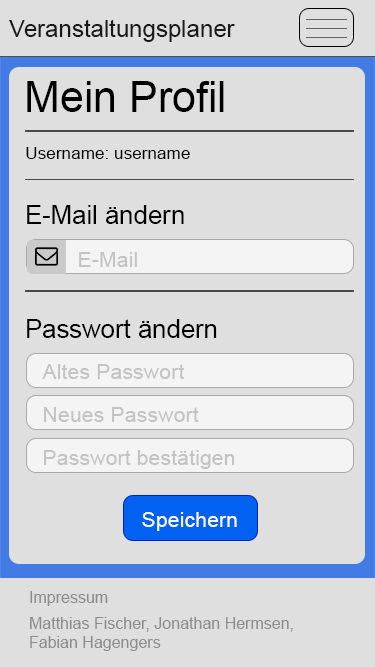
<style>
.page{position:relative;width:375px;height:667px;background:#dfdfdf}
.page>*{position:absolute;margin:0}
.t1{font:24px "ArialMT";color:#191919}
.t2{font:42.7px "ArialMT";color:#000000}
.t3{font:17.1px "ArialMT";color:#000000}
.t4{font:25.6px "ArialMT";color:#000000}
.t5{font:21.4px "ArialMT";color:#c3c3c3}
.t6{font:21.4px "ArialMT";color:#ffffff}
.t7{font:16px "ArialMT";color:#8c8c8c}
</style>
<div class="page">
<p class="t1" style="left:9px;top:19px;width:226px;height:23px">Veranstaltungsplaner</p>
<p class="t2" style="left:27px;top:81px;width:197px;height:31px">Mein Profil</p>
<p class="t3" style="left:26px;top:147px;width:164px;height:12px">Username: username</p>
<p class="t4" style="left:27px;top:205px;width:157px;height:19px">E-Mail ändern</p>
<p class="t5" style="left:79px;top:252px;width:58px;height:15px">E-Mail</p>
<p class="t4" style="left:27px;top:319px;width:190px;height:19px">Passwort ändern</p>
<p class="t5" style="left:42px;top:364px;width:143px;height:15px">Altes Passwort</p>
<p class="t5" style="left:44px;top:407px;width:155px;height:15px">Neues Passwort</p>
<p class="t5" style="left:44px;top:450px;width:191px;height:19px">Passwort bestätigen</p>
<p class="t6" style="left:142px;top:512px;width:95px;height:19px">Speichern</p>
<p class="t7" style="left:30px;top:591px;width:78px;height:15px">Impressum</p>
<p class="t7" style="left:30px;top:617px;width:263px;height:34px">Matthias Fischer, Jonathan Hermsen, <br>Fabian Hagengers</p>
</div>
